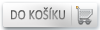
<style>
.page{position:relative;width:100px;height:30px}
.page>*{position:absolute;margin:0}
.t1{font:14px "Calibri";color:#787878;scale:0.88 1}
</style>
<div class="page">
<p class="t1" style="left:11px;top:7px;width:54px;height:13px">DO KOŠÍKU</p>
</div>
